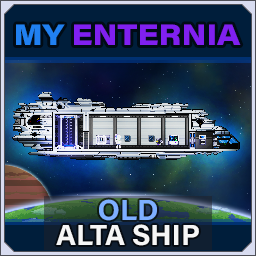
<style>
.page{position:relative;width:256px;height:256px}
.page>*{position:absolute;margin:0}
.t1{font:29.2px "AcuminConcept_760.000wght_112.000wdth";color:#8020f0}
.t2{font:29.2px "AcuminConcept_760.000wght_112.000wdth";color:#2080f0}
.t3{font:29.2px/25px "AcuminConcept-Bold";color:#f6f6f6}
.t4{font:29.2px/25px "AcuminConcept-Bold";color:#7eafff}
</style>
<div class="page">
<p class="t1" style="left:16px;top:24px;width:225px;height:21px"><span class="t2">MY </span>ENTERNIA</p>
<p class="t3" style="left:56px;top:199px;width:143px;height:47px;text-align:center"><span class="t4">OLD<br></span>ALTA SHIP</p>
</div>
